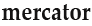
<style>
.page{position:relative;width:92px;height:26px;background:#ffffff}
.page>*{position:absolute;margin:0}
.t1{font:25.3px "PalatinoLinotype-Bold";color:#141313;scale:0.88 1}
</style>
<div class="page">
<p class="t1" style="left:2px;top:4px;width:89px;height:16px">mercator</p>
</div>
